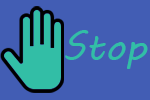
<style>
.page{position:relative;width:150px;height:100px;background:#425db4}
.page>*{position:absolute;margin:0}
.t1{font:37.6px "MVBoli";color:#32bea6}
</style>
<div class="page">
<p class="t1" style="left:65px;top:30px;width:83px;height:39px">Stop</p>
</div>
